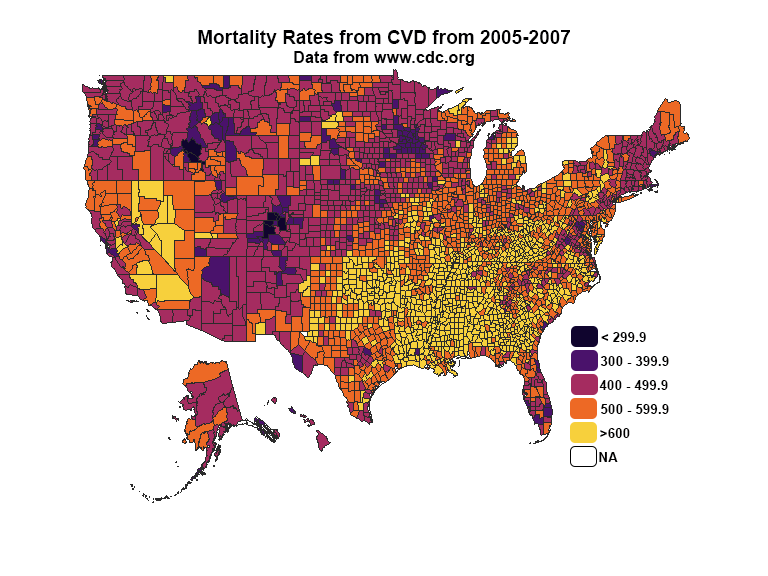
<style>
.page{position:relative;width:768px;height:576px;background:#ffffff}
.page>*{position:absolute;margin:0}
.t1{font:18.7px "Arial-BoldMT";letter-spacing:0.01em;color:#000001}
.t2{font:16px "Arial-BoldMT";letter-spacing:0.01em;color:#000001}
.t3{font:13.3px "Arial-BoldMT";letter-spacing:0.01em;color:#010000}
</style>
<div class="page">
<p class="t1" style="left:198px;top:30px;width:372px;height:36px;text-align:center">Mortality Rates from CVD from 2005-2007<br><span class="t2">Data from www.cdc.org</span></p>
<p class="t3" style="left:601px;top:332px;width:45px;height:10px">&lt; 299.9</p>
<p class="t3" style="left:600px;top:356px;width:69px;height:10px">300 - 399.9</p>
<p class="t3" style="left:599px;top:380px;width:69px;height:10px">400 - 499.9</p>
<p class="t3" style="left:601px;top:404px;width:68px;height:10px">500 - 599.9</p>
<p class="t3" style="left:600px;top:428px;width:30px;height:10px">&gt;600</p>
<p class="t3" style="left:599px;top:452px;width:19px;height:10px">NA</p>
</div>
